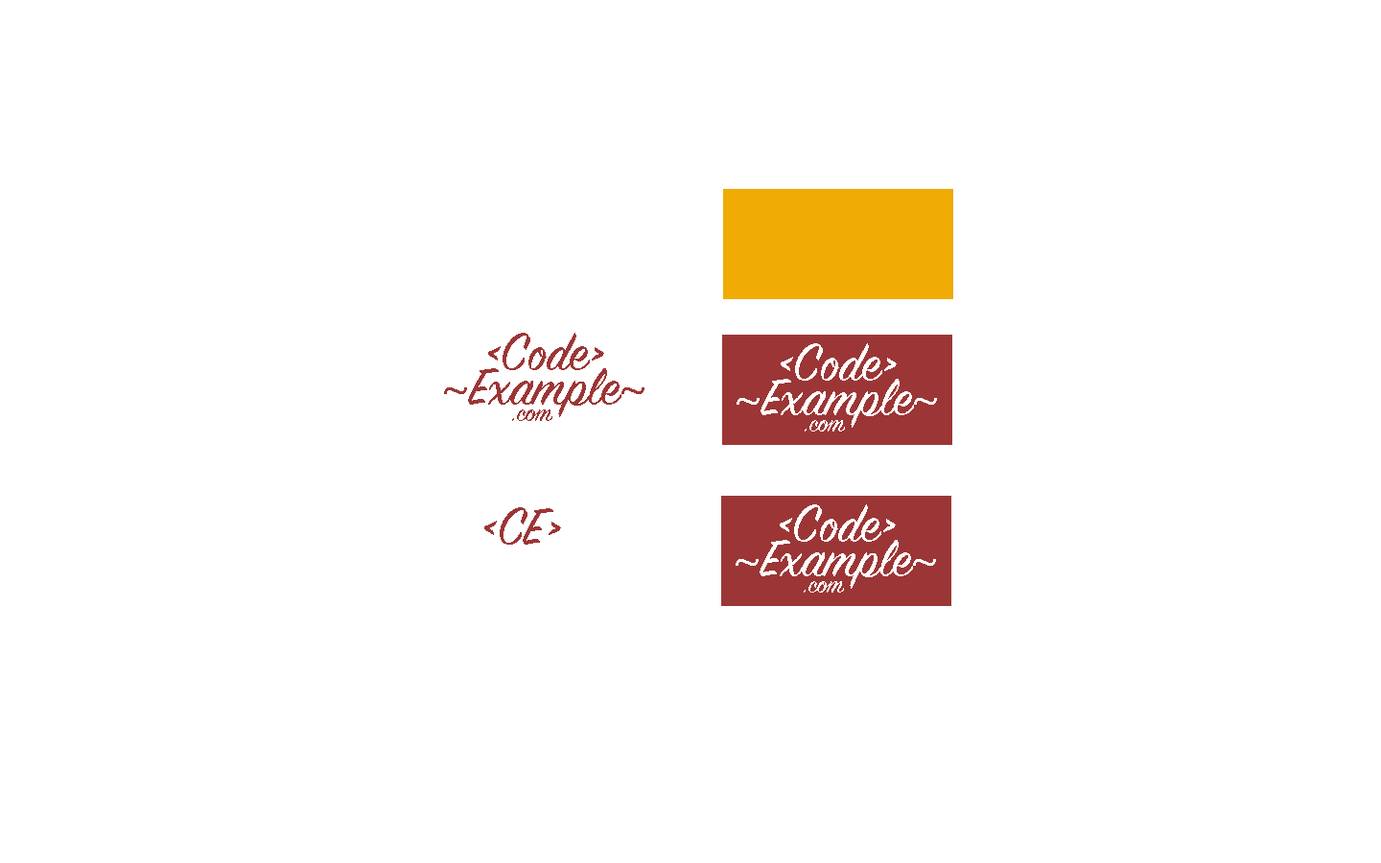
<style>
.page{position:relative;width:1381px;height:863px;background:#ffffff}
.page>*{position:absolute;margin:0}
.t1{font:57.6px/34.5px "SignPainter-HouseScript";color:#9c3636}
.t2{font:46px/28.8px "MyriadPro-Regular";color:#9c3636}
.t3{font:46px/34.5px "MyriadPro-Regular";color:#9c3636}
.t4{font:28.8px/17.3px "SignPainter-HouseScript";color:#9c3636}
.t5{font:57.6px/34.5px "SignPainter-HouseScript";color:#ffffff}
.t6{font:46px/28.8px "MyriadPro-Regular";color:#ffffff}
.t7{font:46px/34.5px "MyriadPro-Regular";color:#ffffff}
.t8{font:28.8px/17.3px "SignPainter-HouseScript";color:#ffffff}
.t9{font:57.6px "SignPainter-HouseScript";color:#9c3636}
</style>
<div class="page">
<p class="t1" style="left:444px;top:333px;width:201px;height:88px;text-align:center">&lt;Code&gt;<br><span class="t2">~</span>Example<span class="t3">~<br>             </span><span class="t4">.com</span></p>
<p class="t5" style="left:737px;top:343px;width:200px;height:89px;text-align:center">&lt;Code&gt;<br><span class="t6">~</span>Example<span class="t7">~<br>             </span><span class="t8">.com</span></p>
<p class="t9" style="left:484px;top:507px;width:77px;height:38px">&lt;CE&gt;</p>
</div>
